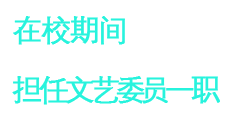
<style>
.page{position:relative;width:225px;height:126px;background:#ffffff}
.page>*{position:absolute;margin:0}
.t1{font:30px/60px "DengXian-Regular";letter-spacing:-0.075em;color:#27f3dd;font-weight:bold}
</style>
<div class="page">
<p class="t1" style="left:12px;top:16px;width:208px;height:89px">在校期间<br>担任文艺委员一职</p>
</div>
